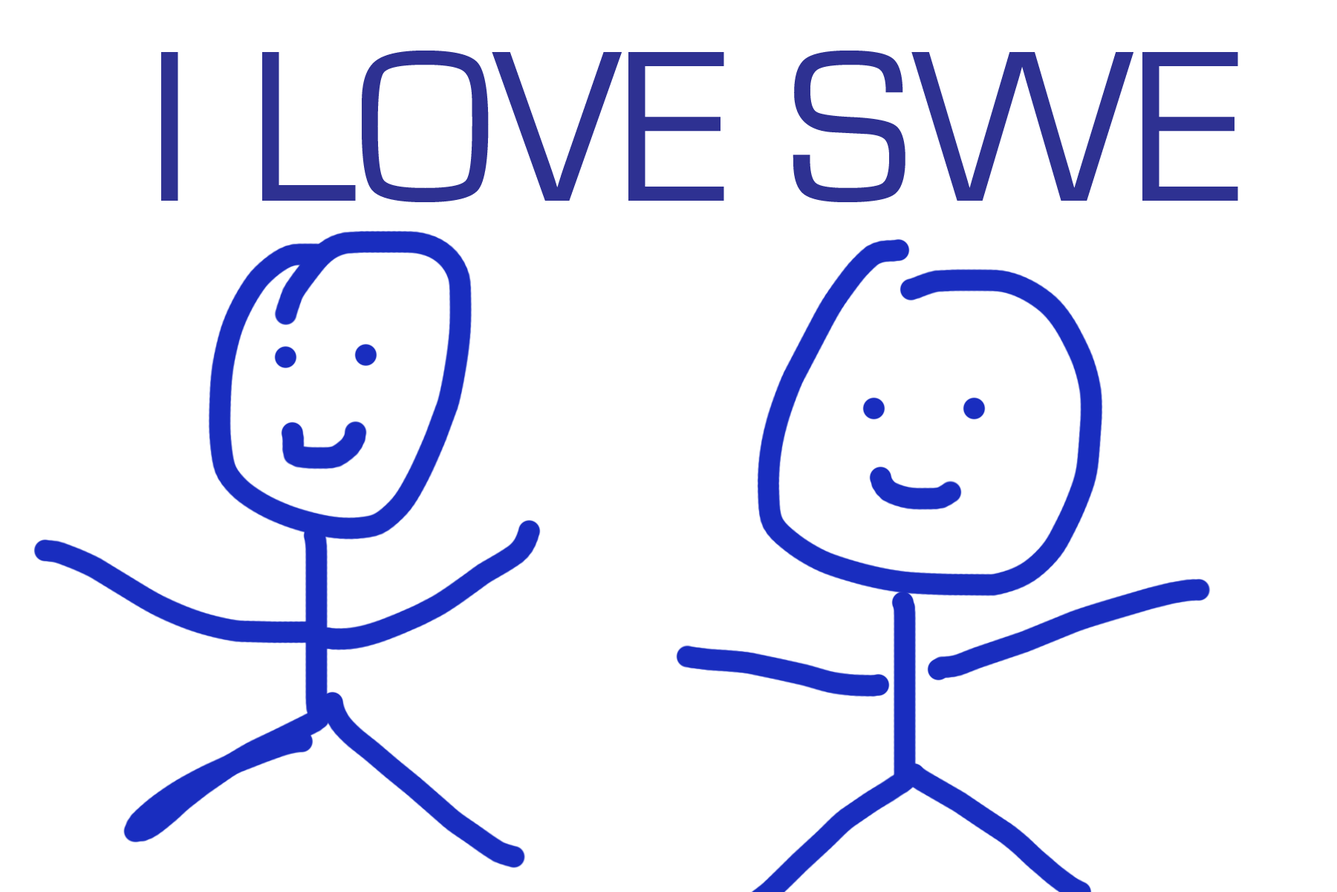
<style>
.page{position:relative;width:1337px;height:892px;background:#ffffff}
.page>*{position:absolute;margin:0}
.t1{font:222.9px "EurostileRegular";color:#2e3192}
</style>
<div class="page">
<p class="t1" style="left:161px;top:51px;width:1078px;height:151px">I LOVE SWE</p>
</div>
